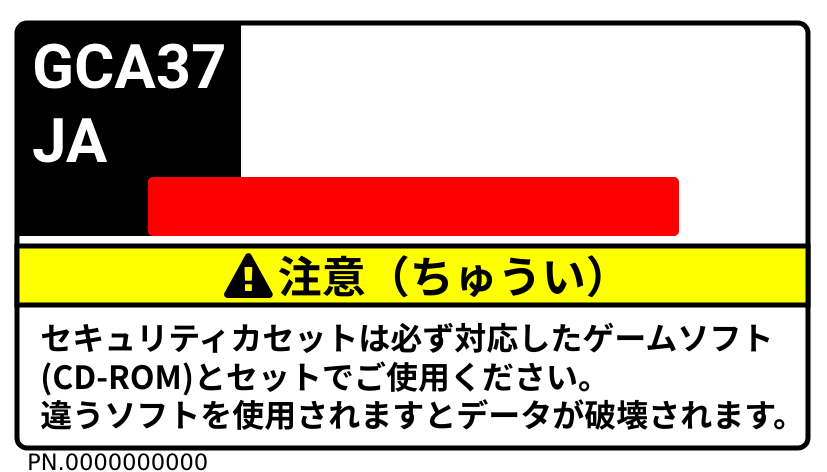
<style>
.page{position:relative;width:827px;height:472px;background:#ffffff}
.page>*{position:absolute;margin:0}
.t1{font:61.6px "HelveticaNeue-Bold";color:#ffffff}
.t2{font:44px "NotoSansJP-Bold";color:#000000}
.t3{font:32px "NotoSansJP-Bold";color:#000000}
.t4{font:22.5px "DejaVuSans";color:#000000}
</style>
<div class="page">
<p class="t1" style="left:33px;top:43px;width:191px;height:120px">GCA37<br>JA</p>
<p class="t2" style="left:279px;top:255px;width:322px;height:43px">注意（ちゅうい）</p>
<p class="t3" style="left:41px;top:322px;width:744px;height:108px">セキュリティカセットは必ず対応したゲームソフト<br>(CD-ROM)とセットでご使用ください。<br>違うソフトを使用されますとデータが破壊されます。</p>
<p class="t4" style="left:29px;top:453px;width:178px;height:18px">PN.0000000000</p>
</div>
